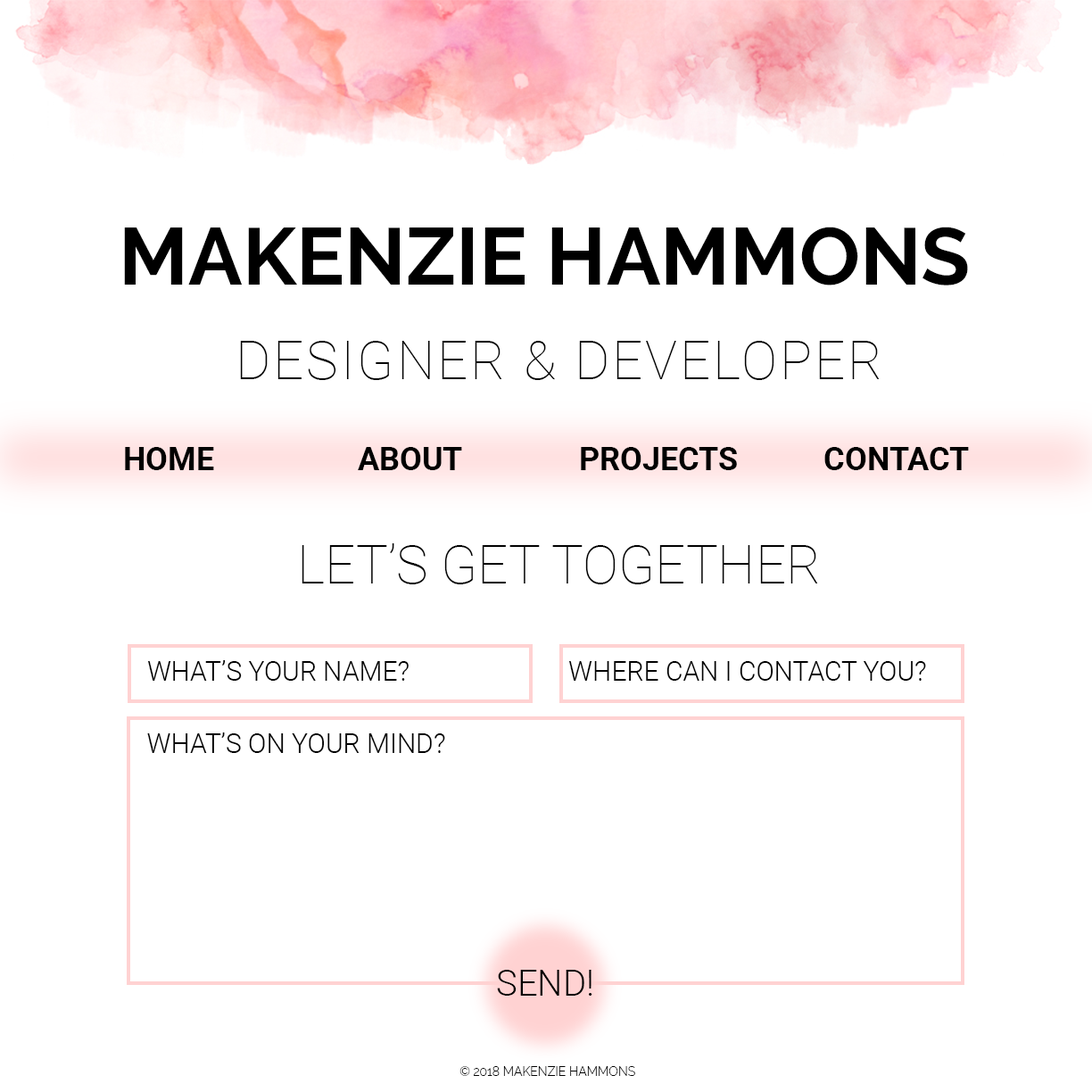
<style>
.page{position:relative;width:1092px;height:1092px;background:#ffffff}
.page>*{position:absolute;margin:0}
.t1{font:80.3px "Raleway-Bold";color:#000000}
.t2{font:53.5px "Roboto-Thin";letter-spacing:0.05em;color:#000000}
.t3{font:32.1px "Roboto-Bold";color:#000000}
.t4{font:53.5px "Roboto-Thin";color:#000000}
.t5{font:26.8px "Roboto-Light";color:#000000}
.t6{font:35.7px "Roboto-Light";color:#000000}
.t7{font:12.5px "Raleway-Light";color:#000000}
</style>
<div class="page">
<p class="t1" style="left:124px;top:227px;width:844px;height:58px">MAKENZIE HAMMONS</p>
<p class="t2" style="left:240px;top:341px;width:640px;height:39px">DESIGNER &amp; DEVELOPER</p>
<p class="t3" style="left:125px;top:447px;width:89px;height:23px">HOME</p>
<p class="t3" style="left:358px;top:447px;width:104px;height:23px">ABOUT</p>
<p class="t3" style="left:581px;top:447px;width:156px;height:23px">PROJECTS</p>
<p class="t3" style="left:824px;top:447px;width:145px;height:23px">CONTACT</p>
<p class="t4" style="left:302px;top:543px;width:516px;height:41px">LET’S GET TOGETHER</p>
<p class="t5" style="left:147px;top:660px;width:262px;height:21px">WHAT’S YOUR NAME?</p>
<p class="t5" style="left:568px;top:661px;width:358px;height:20px">WHERE CAN I CONTACT YOU?</p>
<p class="t5" style="left:147px;top:732px;width:298px;height:21px">WHAT’S ON YOUR MIND?</p>
<p class="t6" style="left:497px;top:970px;width:95px;height:26px">SEND!</p>
<p class="t7" style="left:459px;top:1066px;width:176px;height:10px">© 2018 MAKENZIE HAMMONS</p>
</div>
